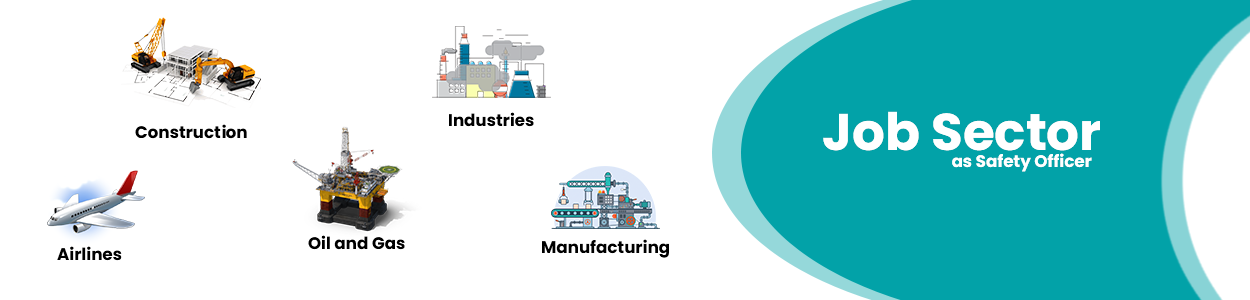
<style>
.page{position:relative;width:1250px;height:300px;background:#ffffff}
.page>*{position:absolute;margin:0}
.t1{font:16.7px "Poppins-Bold";color:#000000}
.t2{font:51.6px "Poppins-Bold";color:#ffffff}
.t3{font:16.7px "Poppins-Bold";color:#ffffff}
</style>
<div class="page">
<p class="t1" style="left:449px;top:112px;width:85px;height:15px">Industries</p>
<p class="t2" style="left:823px;top:111px;width:277px;height:40px">Job Sector</p>
<p class="t1" style="left:135px;top:124px;width:112px;height:15px">Construction</p>
<p class="t3" style="left:952px;top:153px;width:140px;height:19px">as Safety Officer</p>
<p class="t1" style="left:57px;top:246px;width:65px;height:15px">Airlines</p>
<p class="t1" style="left:308px;top:235px;width:97px;height:15px">Oil and Gas</p>
<p class="t1" style="left:542px;top:239px;width:127px;height:19px">Manufacturing</p>
</div>
